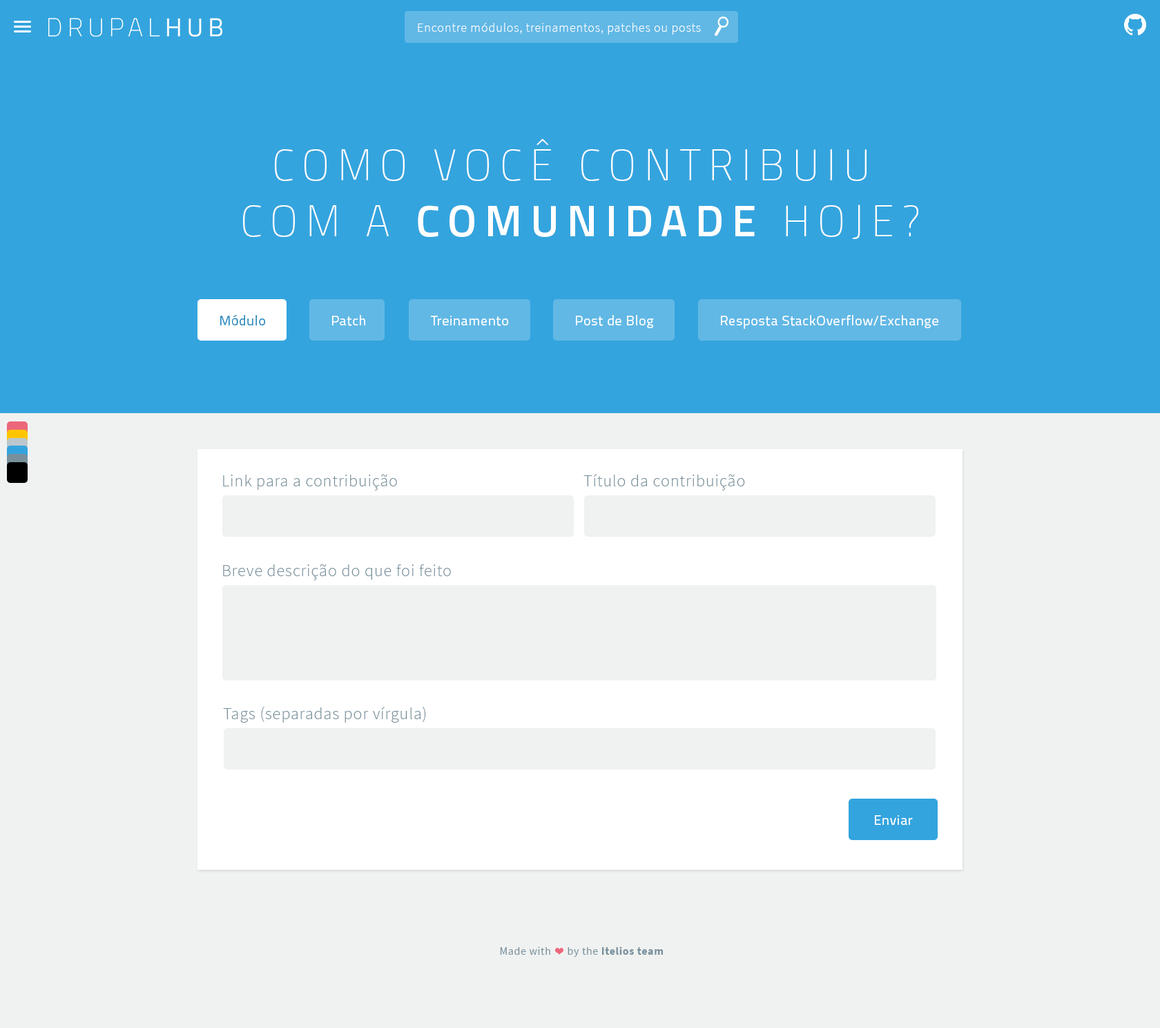
<style>
.page{position:relative;width:1160px;height:1028px;background:#f0f2f1}
.page>*{position:absolute;margin:0}
.t1{font:12.7px "SourceSansPro-Light";letter-spacing:0.04em;color:#ffffff}
.t2{font:44.3px/55.9px "Titillium-ThinUpright";letter-spacing:0.18em;color:#ffffff;text-transform:uppercase}
.t3{font:44.3px/55.9px "Titillium-Semibold";letter-spacing:0.18em;color:#ffffff;text-transform:uppercase}
.t4{font:13.8px "Titillium-Regular";letter-spacing:0.04em;color:#258abf}
.t5{font:13.8px "Titillium-Regular";letter-spacing:0.04em;color:#ffffff}
.t6{font:16.6px "SourceSansPro-Light";letter-spacing:0.04em;color:#78909c}
.t7{font:11.1px "SourceSansPro-Regular";letter-spacing:0.04em;color:#78909c}
.t8{font:11.1px "SourceSansPro-Bold";letter-spacing:0.04em;color:#78909c}
</style>
<div class="page">
<p class="t1" style="left:418px;top:23px;width:283px;height:12px">Encontre módulos, treinamentos, patches ou posts</p>
<p class="t2" style="left:243px;top:139px;width:676px;height:100px;text-align:center">como você contribuiu <br>com a <span class="t3">comunidade </span>hoje?</p>
<p class="t4" style="left:220px;top:314px;width:45px;height:11px">Módulo</p>
<p class="t5" style="left:332px;top:315px;width:33px;height:11px">Patch</p>
<p class="t5" style="left:430px;top:316px;width:78px;height:10px">Treinamento</p>
<p class="t5" style="left:576px;top:315px;width:78px;height:13px">Post de Blog</p>
<p class="t5" style="left:721px;top:315px;width:218px;height:14px">Resposta StackOverflow/Exchange</p>
<p class="t6" style="left:223px;top:474px;width:174px;height:16px">Link para a contribuição</p>
<p class="t6" style="left:584px;top:474px;width:161px;height:16px">Título da contribuição</p>
<p class="t6" style="left:223px;top:564px;width:228px;height:16px">Breve descrição do que foi feito</p>
<p class="t6" style="left:223px;top:707px;width:203px;height:15px">Tags (separadas por vírgula)</p>
<p class="t5" style="left:875px;top:815px;width:38px;height:10px">Enviar</p>
<p class="t7" style="left:500px;top:946px;width:163px;height:11px">Made with      by the <span class="t8">Itelios team</span></p>
</div>
